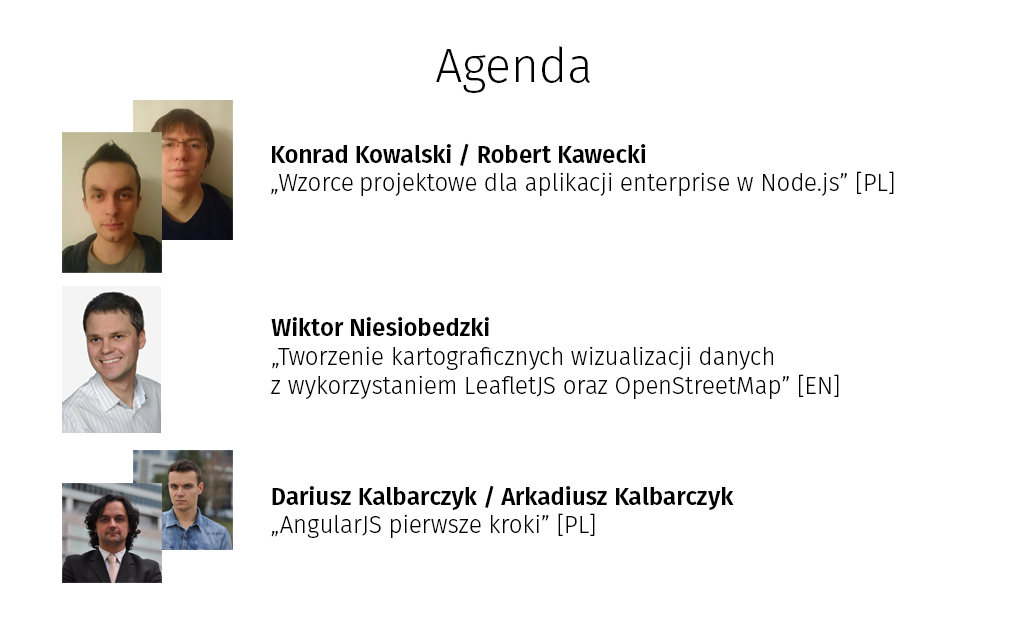
<style>
.page{position:relative;width:1024px;height:640px;background:#ffffff}
.page>*{position:absolute;margin:0}
.t1{font:48px "FiraSans-Light";color:#000000}
.t2{font:24px "FiraSans-Light";color:#000000}
.t3{font:24px "FiraSans-SemiBold";color:#000000}
</style>
<div class="page">
<p class="t1" style="left:436px;top:46px;width:154px;height:47px">Agenda</p>
<p class="t2" style="left:271px;top:143px;width:623px;height:53px"><span class="t3">Konrad Kowalski / Robert Kawecki<br></span>„Wzorce projektowe dla aplikacji enterprise w Node.js” [PL]</p>
<p class="t2" style="left:271px;top:317px;width:568px;height:82px"><span class="t3">Wiktor Niesiobedzki<br></span>„Tworzenie kartograficznych wizualizacji danych <br>z wykorzystaniem LeafletJS oraz OpenStreetMap” [EN]</p>
<p class="t3" style="left:271px;top:485px;width:463px;height:53px">Dariusz Kalbarczyk / Arkadiusz Kalbarczyk<br><span class="t2">„AngularJS pierwsze kroki” [PL]</span></p>
</div>
